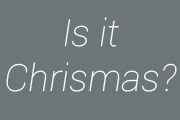
<style>
.page{position:relative;width:180px;height:120px;background:#6d7578}
.page>*{position:absolute;margin:0}
.t1{font:37.5px "Roboto-ThinItalic";color:#ffffff}
</style>
<div class="page">
<p class="t1" style="left:6px;top:17px;width:171px;height:75px;text-align:center">Is it <br>Chrismas?</p>
</div>
